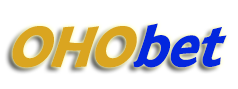
<style>
.page{position:relative;width:238px;height:89px;background:#ffffff}
.page>*{position:absolute;margin:0}
.t1{font:80.5px "DBEttaroX";color:#daa520;font-style:italic;scale:0.96 1}
.t2{font:80.5px "DBEttaroX";color:#0327de;font-style:italic;scale:0.96 1}
</style>
<div class="page">
<p class="t1" style="left:12px;top:23px;width:215px;height:45px">OHO<span class="t2">bet</span></p>
</div>
